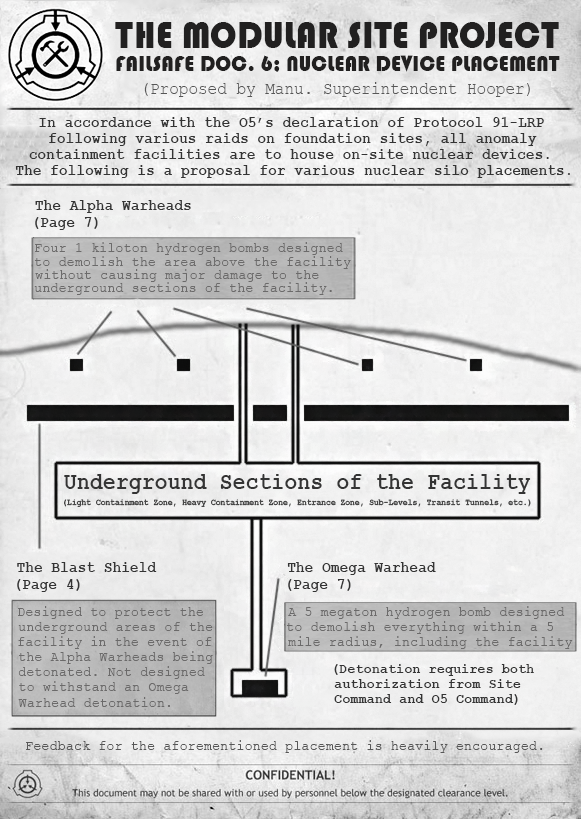
<style>
.page{position:relative;width:581px;height:819px}
.page>*{position:absolute;margin:0}
.t1{font:38.8px "Bauhaus93";letter-spacing:0.01em;color:#212020;scale:0.9 1}
.t2{font:23.2px "Bauhaus93";letter-spacing:0.01em;color:#212020;scale:0.9 1}
.t3{font:17.5px "CourierNewPSMT";letter-spacing:0.01em;color:#575757;scale:0.9 1}
.t4{font:16.3px "CourierNewPS-BoldMT";letter-spacing:0.01em;color:#343434;scale:0.88 1}
.t5{font:14.8px "CourierNewPSMT";letter-spacing:0.01em;color:#6b6a6a;scale:0.9 1}
.t6{font:24.2px "CourierNewPS-BoldMT";letter-spacing:0.01em;color:#343434;scale:0.88 1}
.t7{font:9px "CourierNewPS-BoldMT";letter-spacing:0.01em;color:#343434;scale:0.88 1}
.t8{font:14.8px "CourierNewPS-BoldMT";letter-spacing:0.01em;color:#343434;scale:0.9 1}
.t9{font:14.8px "CourierNewPSMT";letter-spacing:0.01em;color:#575757;scale:0.9 1}
</style>
<div class="page">
<p class="t1" style="left:115px;top:22px;width:444px;height:26px">THE MODULAR SITE PROJECT</p>
<p class="t2" style="left:116px;top:55px;width:444px;height:17px">FAILSAFE DOC. 6; NUCLEAR DEVICE PLACEMENT</p>
<p class="t3" style="left:144px;top:82px;width:386px;height:15px">(Proposed by Manu. Superintendent Hooper)</p>
<p class="t4" style="left:39px;top:117px;width:505px;height:10px">In accordance with the O5’s declaration of Protocol 91-LRP</p>
<p class="t4" style="left:49px;top:133px;width:488px;height:13px">following various raids on foundation sites, all anomaly</p>
<p class="t4" style="left:29px;top:149px;width:520px;height:10px">containment facilities are to house on-site nuclear devices.</p>
<p class="t4" style="left:15px;top:165px;width:555px;height:13px">The following is a proposal for various nuclear silo placements.</p>
<p class="t4" style="left:35px;top:200px;width:156px;height:13px">The Alpha Warheads</p>
<p class="t4" style="left:35px;top:217px;width:63px;height:13px">(Page 7)</p>
<p class="t5" style="left:35px;top:242px;width:308px;height:13px">Four 1 kiloton hydrogen bombs designed</p>
<p class="t5" style="left:35px;top:256px;width:316px;height:13px">to demolish the area above the facility</p>
<p class="t5" style="left:35px;top:269px;width:284px;height:13px">without causing major damage to the</p>
<p class="t5" style="left:34px;top:282px;width:298px;height:13px">underground sections of the facility.</p>
<p class="t6" style="left:64px;top:474px;width:467px;height:20px">Underground Sections of the Facility</p>
<p class="t7" style="left:64px;top:499px;width:467px;height:8px">(Light Containment Zone, Heavy Containment Zone, Entrance Zone, Sub-Levels, Transit Tunnels, etc.)</p>
<p class="t4" style="left:17px;top:562px;width:140px;height:10px">The Blast Shield</p>
<p class="t4" style="left:287px;top:562px;width:149px;height:13px">The Omega Warhead</p>
<p class="t4" style="left:17px;top:579px;width:63px;height:13px">(Page 4)</p>
<p class="t4" style="left:288px;top:579px;width:63px;height:13px">(Page 7)</p>
<p class="t5" style="left:18px;top:606px;width:185px;height:13px">Designed to protect the</p>
<p class="t5" style="left:288px;top:606px;width:277px;height:13px">A 5 megaton hydrogen bomb designed</p>
<p class="t5" style="left:18px;top:622px;width:195px;height:12px">underground areas of the</p>
<p class="t5" style="left:287px;top:621px;width:266px;height:13px">to demolish everything within a 5</p>
<p class="t5" style="left:18px;top:636px;width:194px;height:13px">facility in the event of</p>
<p class="t5" style="left:288px;top:636px;width:285px;height:13px">mile radius, including the facility</p>
<p class="t5" style="left:19px;top:651px;width:194px;height:13px">the Alpha Warheads being</p>
<p class="t8" style="left:334px;top:664px;width:200px;height:12px">(Detonation requires both</p>
<p class="t5" style="left:18px;top:666px;width:187px;height:13px">detonated. Not designed</p>
<p class="t5" style="left:19px;top:681px;width:170px;height:13px">to withstand an Omega</p>
<p class="t8" style="left:334px;top:679px;width:187px;height:9px">authorization from Site</p>
<p class="t5" style="left:18px;top:697px;width:152px;height:10px">Warhead detonation.</p>
<p class="t8" style="left:334px;top:694px;width:184px;height:11px">Command and O5 Command)</p>
<p class="t9" style="left:26px;top:740px;width:517px;height:13px">Feedback for the aforementioned placement is heavily encouraged.</p>
</div>
